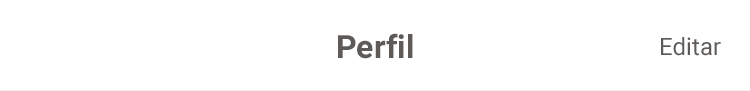
<style>
.page{position:relative;width:750px;height:91px;background:#ffffff}
.page>*{position:absolute;margin:0}
.t1{font:32px "Roboto-Bold";color:#5d5a58}
.t2{font:24px "Roboto-Regular";color:#5d5a58}
</style>
<div class="page">
<p class="t1" style="left:338px;top:33px;width:75px;height:26px">Perfil</p>
<p class="t2" style="left:661px;top:37px;width:60px;height:19px">Editar</p>
</div>
